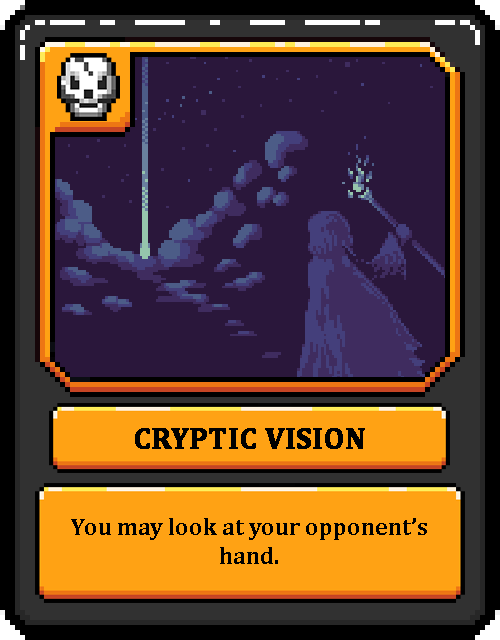
<style>
.page{position:relative;width:500px;height:640px;background:#2a173b}
.page>*{position:absolute;margin:0}
.t1{font:30px "Cambria-Bold";color:#000000;text-transform:uppercase;font-weight:bold}
.t2{font:24px "Cambria-Bold";color:#000000}
</style>
<div class="page">
<p class="t1" style="left:135px;top:428px;width:230px;height:21px">Cryptic Vision</p>
<p class="t2" style="left:71px;top:518px;width:356px;height:46px;text-align:center">You may look at your opponent’s hand.</p>
</div>
